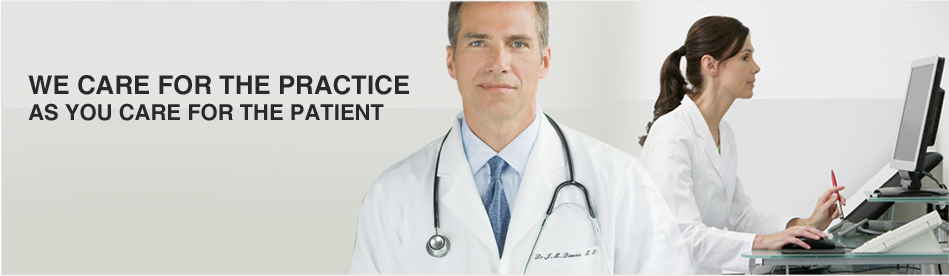
<style>
.page{position:relative;width:949px;height:276px}
.page>*{position:absolute;margin:0}
.t1{font:22px "Helvetica-Bold";color:#292929;text-transform:uppercase}
.t2{font:25.8px "Helvetica-Bold";color:#292929;text-transform:uppercase}
</style>
<div class="page">
<p class="t1" style="left:28px;top:75px;width:381px;height:46px"><span class="t2">We care for the practice <br></span>as you care for the patient</p>
</div>
